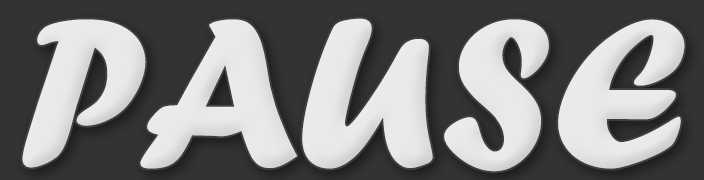
<style>
.page{position:relative;width:704px;height:180px;background:#333333}
.page>*{position:absolute;margin:0}
.t1{font:220px "ForteMT";color:#e9e9e9}
</style>
<div class="page">
<p class="t1" style="left:22px;top:18px;width:663px;height:154px">PAUSE</p>
</div>
